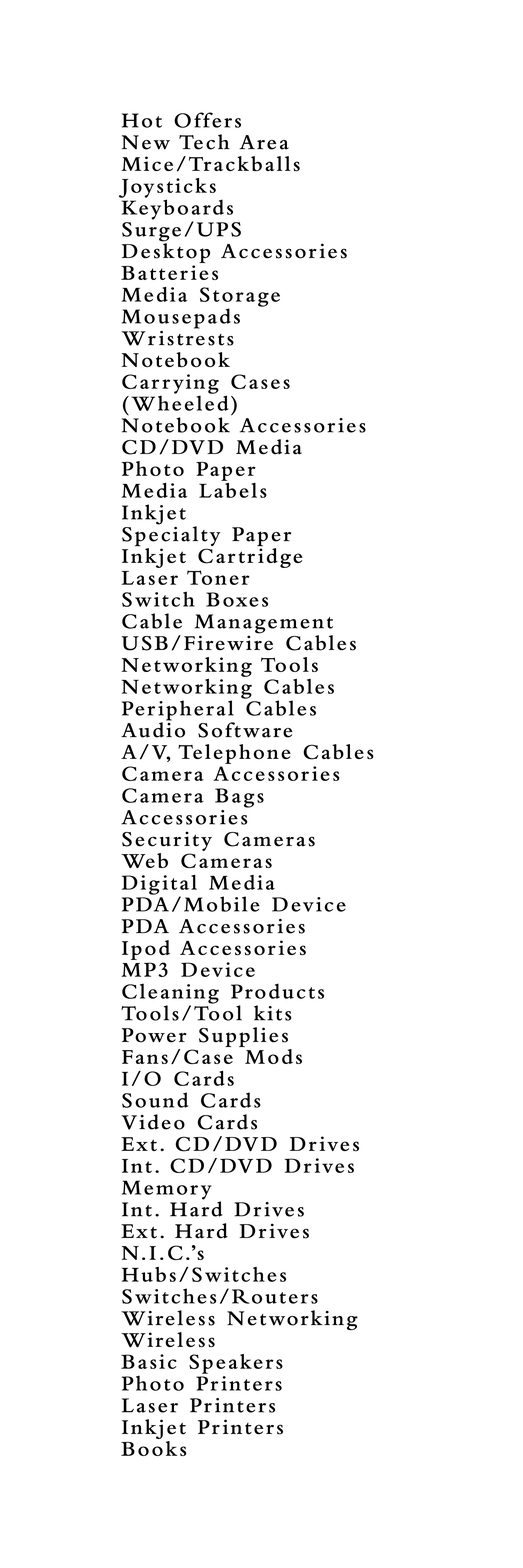
<style>
.page{position:relative;width:523px;height:1568px;background:#ffffff}
.page>*{position:absolute;margin:0}
.t1{font:21.8px/21.8px "BemboMT-SemiBold";letter-spacing:0.1em;color:#010101}
</style>
<div class="page">
<p class="t1" style="left:119px;top:113px;width:254px;height:1343px">Hot Offers<br>New Tech Area<br>Mice/Trackballs<br>Joysticks<br>Keyboards<br>Surge/UPS<br>Desktop Accessories<br>Batteries<br>Media Storage<br>Mousepads <br>Wristrests<br>Notebook <br>Carrying Cases <br>(Wheeled)<br>Notebook Accessories<br>CD/DVD Media<br>Photo Paper<br>Media Labels<br>Inkjet<br>Specialty Paper<br>Inkjet Cartridge<br>Laser Toner<br>Switch Boxes<br>Cable Management<br>USB/Firewire Cables<br>Networking Tools<br>Networking Cables<br>Peripheral Cables<br>Audio Software<br>A/V, Telephone Cables<br>Camera Accessories<br>Camera Bags<br>Accessories<br>Security Cameras<br>Web Cameras<br>Digital Media<br>PDA/Mobile Device<br>PDA Accessories<br>Ipod Accessories<br>MP3 Device<br>Cleaning Products<br>Tools/Tool kits<br>Power Supplies<br>Fans/Case Mods<br>I/O Cards<br>Sound Cards<br>Video Cards<br>Ext. CD/DVD Drives<br>Int. CD/DVD Drives<br>Memory<br>Int. Hard Drives<br>Ext. Hard Drives<br>N.I.C.’s<br>Hubs/Switches<br>Switches/Routers<br>Wireless Networking<br>Wireless <br>Basic Speakers<br>Photo Printers<br>Laser Printers<br>Inkjet Printers<br>Books</p>
</div>
